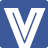
<style>
.page{position:relative;width:48px;height:48px;background:#3b5998}
.page>*{position:absolute;margin:0}
.t1{font:60px "Phosphate-Inline";color:#ffffff}
</style>
<div class="page">
<p class="t1" style="left:3px;top:8px;width:43px;height:40px">v</p>
</div>
